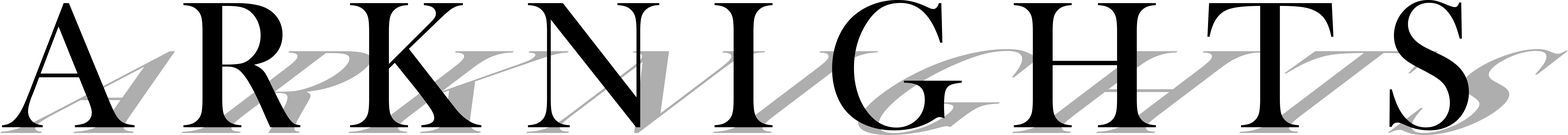
<style>
.page{position:relative;width:1568px;height:135px;background:#ffffff}
.page>*{position:absolute;margin:0}
.t1{font:185.7px "BaskOldFace";color:#000000}
</style>
<div class="page">
<p class="t1" style="left:2px;top:0px;width:1467px;height:130px">A R K N I G H T S</p>
</div>
